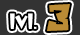
<style>
.page{position:relative;width:80px;height:35px;background:#333333}
.page>*{position:absolute;margin:0}
.t1{font:38.9px "SUPERGAME";color:#bb8c35}
.t2{font:22.9px "SUPERGAME";color:#ffffff}
</style>
<div class="page">
<p class="t1" style="left:47px;top:4px;width:23px;height:27px">3</p>
<p class="t2" style="left:10px;top:13px;width:27px;height:16px">lvl.</p>
</div>
